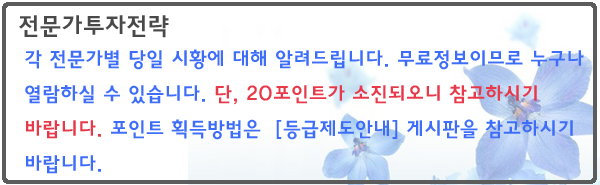
<style>
.page{position:relative;width:600px;height:185px;background:#ffffff}
.page>*{position:absolute;margin:0}
.t1{font:24px "HaanYGodic24";color:#494949}
.t2{font:20px "HaanYGodic24";color:#3e6ef9}
.t3{font:20px "HaanYGodic24";color:#e73949}
</style>
<div class="page">
<p class="t1" style="left:19px;top:15px;width:150px;height:23px">전문가투자전략</p>
<p class="t2" style="left:25px;top:49px;width:559px;height:125px">각 전문가별 당일 시황에 대해 알려드립니다. 무료정보이므로 누구나 열람하실 수 있습니다. <span class="t3">단, 20포인트가 소진되오니 참고하시기 바랍니다.</span> 포인트 획득방법은  [등급제도안내] 게시판을 참고하시기 바랍니다.</p>
</div>
